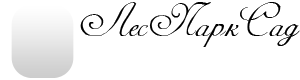
<style>
.page{position:relative;width:300px;height:80px;background:#ffffff}
.page>*{position:absolute;margin:0}
.t1{font:55.1px "AdineKirnberg";color:#000000}
</style>
<div class="page">
<p class="t1" style="left:80px;top:2px;width:220px;height:45px">ЛесПаркСад</p>
</div>
